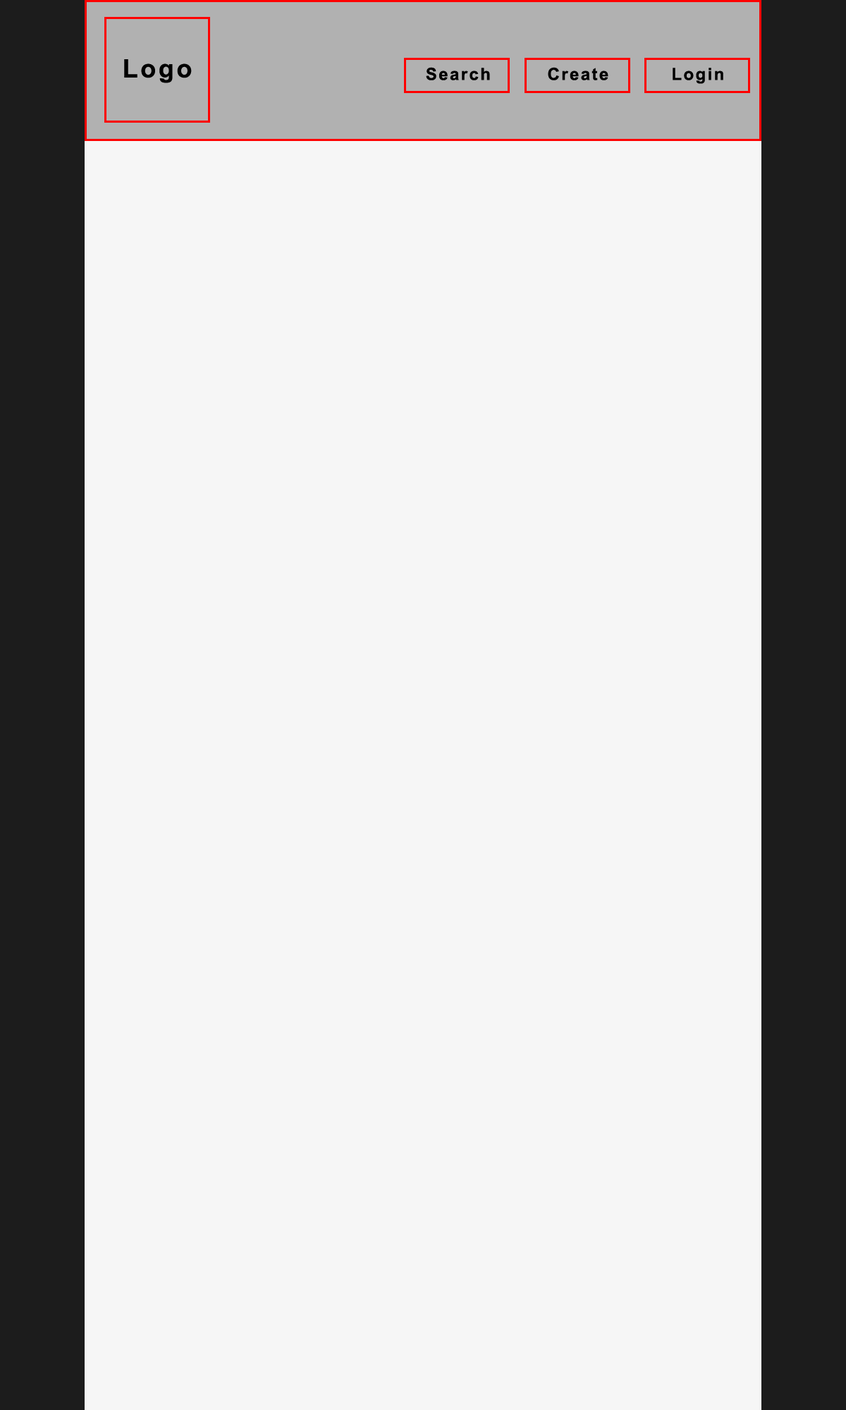
<style>
.page{position:relative;width:846px;height:1410px;background:#f6f6f6}
.page>*{position:absolute;margin:0}
.t1{font:25.4px "Arial-BoldMT";letter-spacing:0.1em;color:#000000}
.t2{font:16.9px "Arial-BoldMT";letter-spacing:0.1em;color:#000000}
</style>
<div class="page">
<p class="t1" style="left:124px;top:59px;width:68px;height:24px">Logo</p>
<p class="t2" style="left:426px;top:67px;width:64px;height:13px">Search</p>
<p class="t2" style="left:548px;top:67px;width:60px;height:13px">Create</p>
<p class="t2" style="left:672px;top:68px;width:51px;height:16px">Login</p>
</div>
